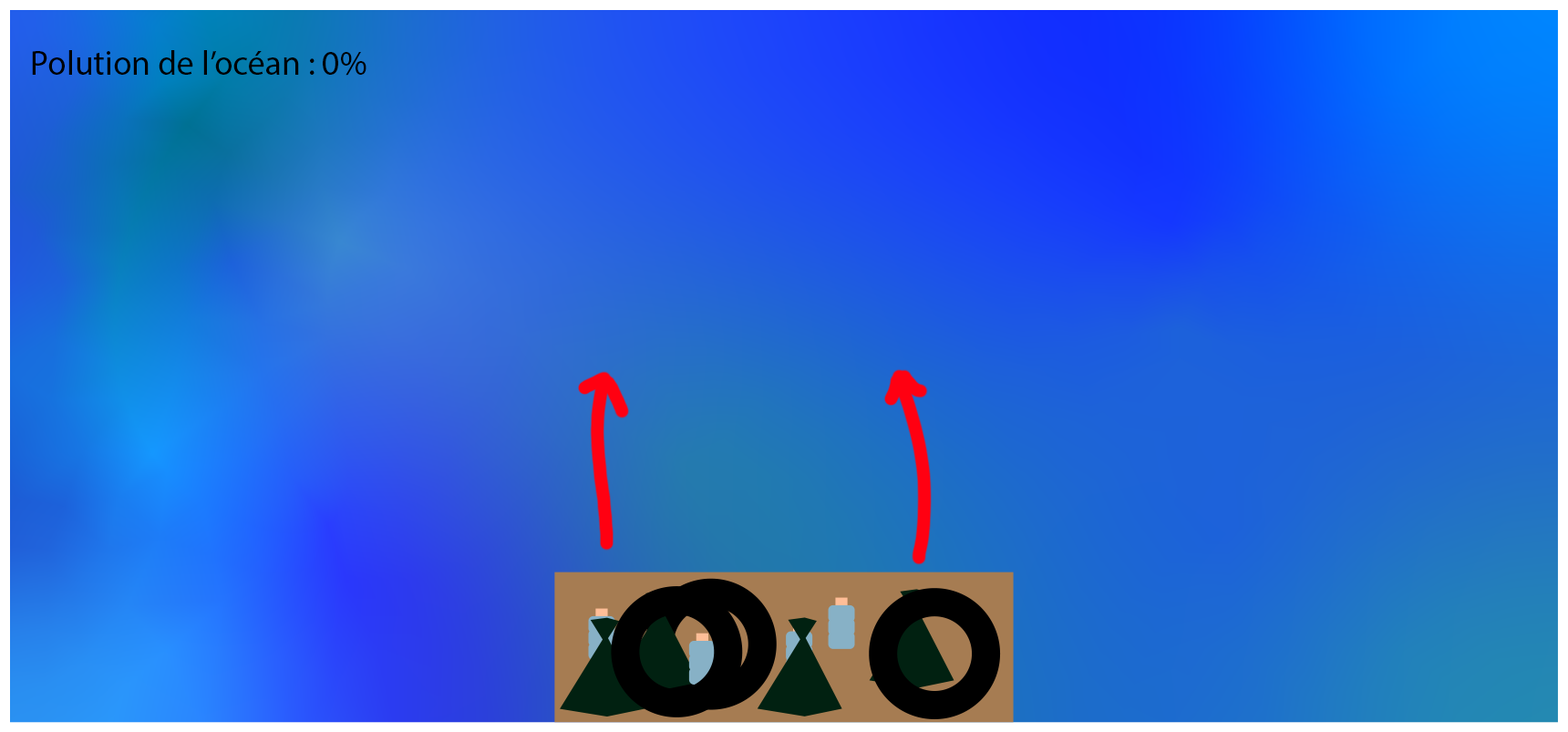
<style>
.page{position:relative;width:1568px;height:732px}
.page>*{position:absolute;margin:0}
.t1{font:34.2px "MyriadPro-Regular";color:#000000}
</style>
<div class="page">
<p class="t1" style="left:32px;top:50px;width:334px;height:26px">Polution de l’océan : 0%</p>
</div>
